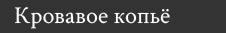
<style>
.page{position:relative;width:226px;height:33px;background:#333333}
.page>*{position:absolute;margin:0}
.t1{font:24px "CrimsonText-Regular";color:#ffffff}
</style>
<div class="page">
<p class="t1" style="left:15px;top:7px;width:155px;height:22px">Кровавое копьё</p>
</div>
